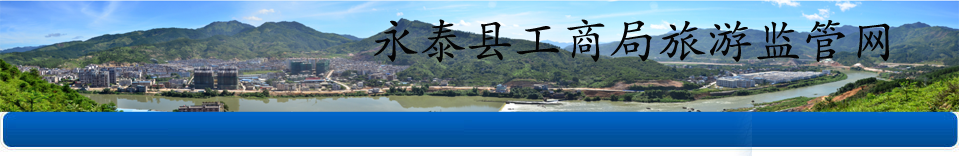
<style>
.page{position:relative;width:959px;height:156px}
.page>*{position:absolute;margin:0}
.t1{font:48px "STKaiti";color:#040404}
</style>
<div class="page">
<p class="t1" style="left:373px;top:19px;width:517px;height:44px">永泰县工商局旅游监管网</p>
</div>
